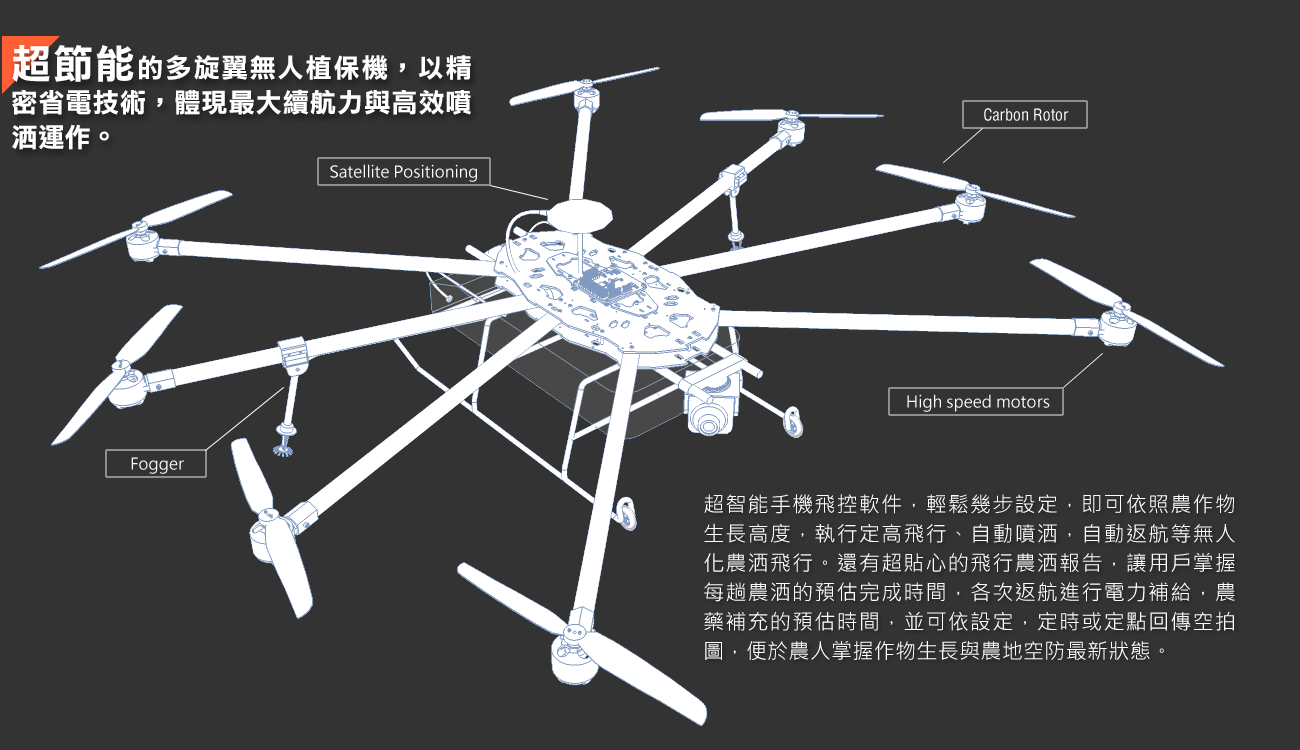
<style>
.page{position:relative;width:1300px;height:750px;background:#333333}
.page>*{position:absolute;margin:0}
.t1{font:26.7px/34.7px "DFLiHei-Bd-WIN-BF";color:#ffffff}
.t2{font:40px/34.7px "DFLiHei-Bd-WIN-BF";color:#ffffff}
.t3{font:12px "Helvetica-Condensed";color:#ffffff}
.t4{font:12px "MicrosoftJhengHeiRegular";color:#ffffff}
.t5{font:21.3px/29.3px "MicrosoftJhengHeiRegular";color:#ffffff}
</style>
<div class="page">
<p class="t1" style="left:12px;top:45px;width:459px;height:105px;text-align:justify"><span class="t2">超節能</span>的多旋翼無人植保機，以精密省電技術，體現最大續航力與高效噴洒運作。</p>
<p class="t3" style="left:984px;top:108px;width:85px;height:13px">Carbon Rotor</p>
<p class="t4" style="left:330px;top:164px;width:147px;height:18px">Satellite Positioning</p>
<p class="t4" style="left:907px;top:394px;width:143px;height:18px">High speed motors</p>
<p class="t4" style="left:131px;top:457px;width:53px;height:17px">Fogger</p>
<p class="t5" style="left:704px;top:494px;width:531px;height:166px;text-align:justify">超智能手機飛控軟件，輕鬆幾步設定，即可依照農作物生長高度，執行定高飛行、自動噴洒，自動返航等無人化農洒飛行。還有超貼心的飛行農洒報告，讓用戶掌握每趟農洒的預估完成時間，各次返航進行電力補給，農藥補充的預估時間，並可依設定，定時或定點回傳空拍圖，便於農人掌握作物生長與農地空防最新狀態。</p>
</div>
